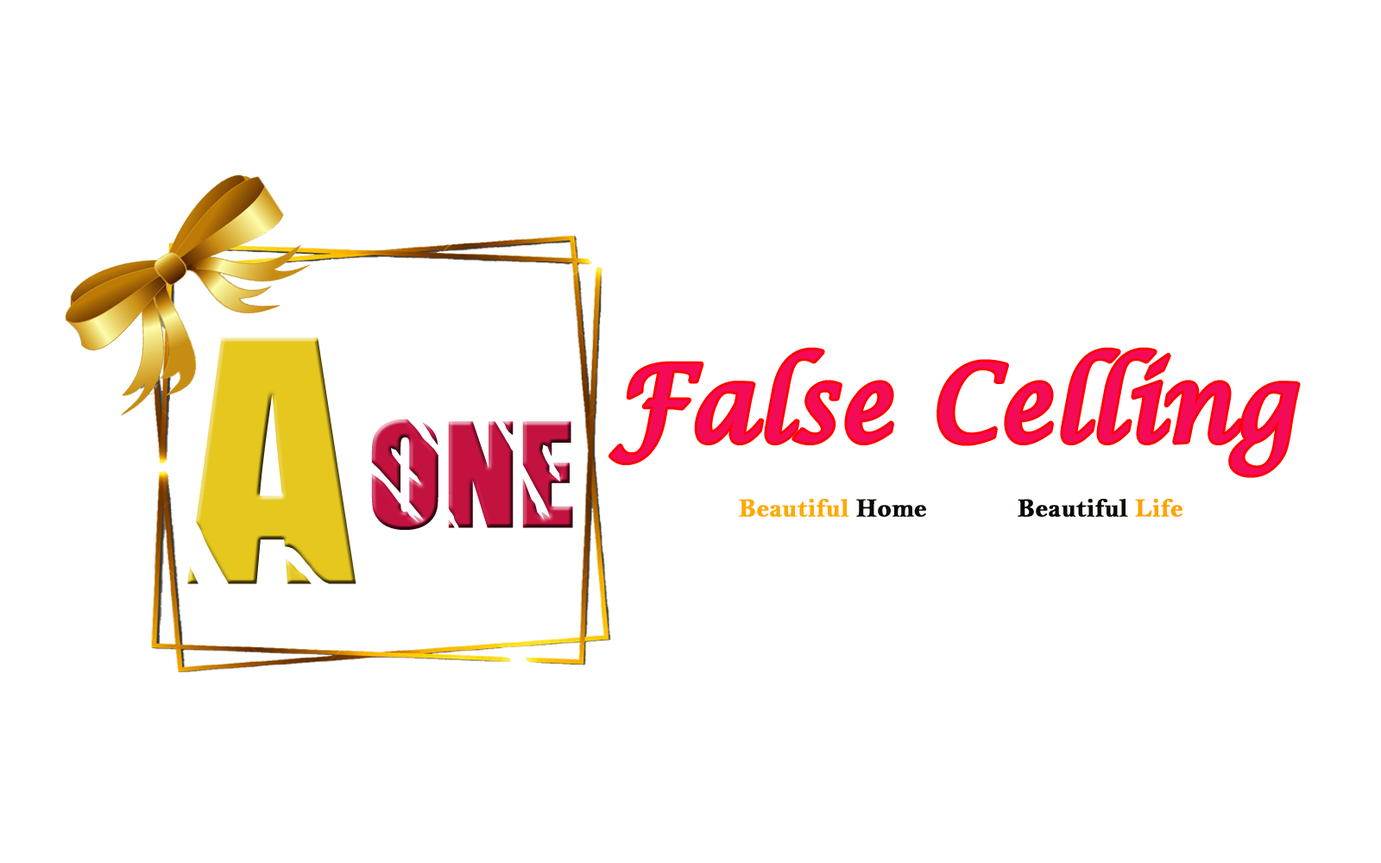
<style>
.page{position:relative;width:1381px;height:863px;background:#ffffff}
.page>*{position:absolute;margin:0}
.t1{font:172.7px "Insomnia-Regular";color:#c41240}
.t2{font:233.1px "Insomnia-Regular";color:#e5c71e}
.t3{font:103.6px "LucidaCalligraphy-Italic";color:#f40b58;font-weight:bold;scale:0.94 1}
.t4{font:25.9px "BellMTBold";color:#fea900;font-weight:bold}
.t5{font:25.9px "BellMTBold";color:#0d0b06;font-weight:bold}
.t6{font:25.9px "BellMTBold";color:#0a0701;font-weight:bold}
.t7{font:25.9px "BellMTBold";color:#ffa200;font-weight:bold}
</style>
<div class="page">
<p class="t1" style="left:187px;top:338px;width:386px;height:246px"><span class="t2">A</span>ONE</p>
<p class="t3" style="left:610px;top:350px;width:688px;height:126px">False Celling</p>
<p class="t4" style="left:739px;top:499px;width:444px;height:18px">Beautiful <span class="t5">Home </span><span class="t6">           Beautiful </span><span class="t7">Life</span></p>
</div>
